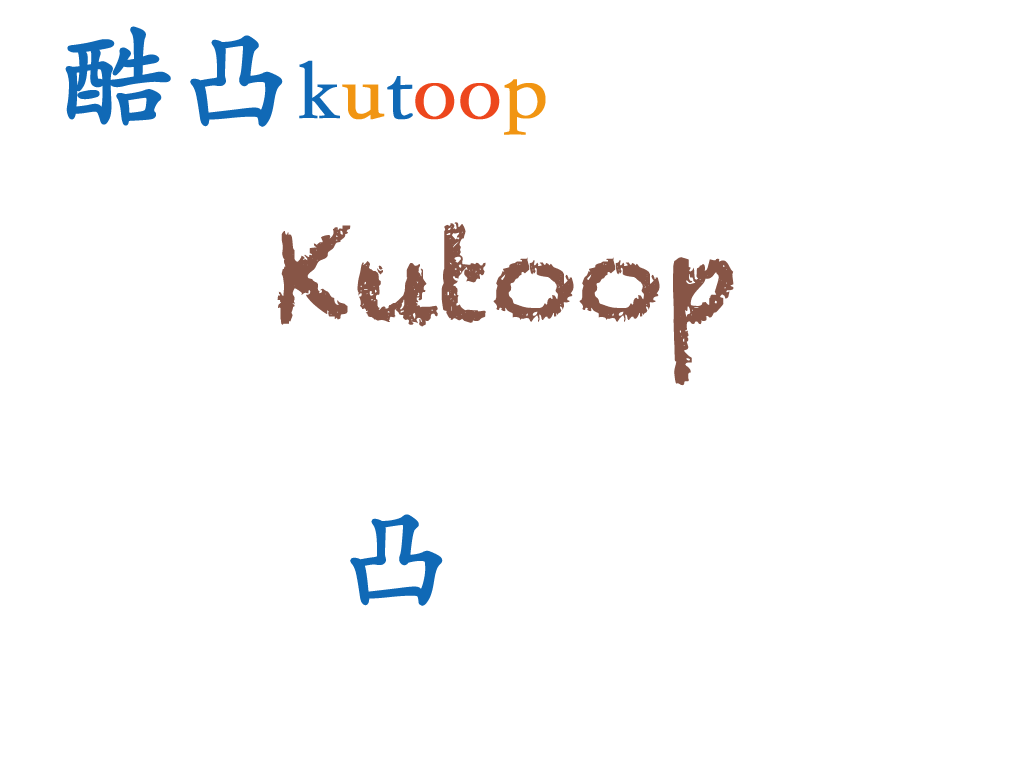
<style>
.page{position:relative;width:1024px;height:768px;background:#ffffff}
.page>*{position:absolute;margin:0}
.t1{font:120px "STKaiti";color:#1069b6;font-weight:bold}
.t2{font:85px "STKaiti";color:#1069b6;font-weight:bold}
.t3{font:85px "STKaiti";color:#f19512;font-weight:bold}
.t4{font:85px "STKaiti";color:#ed471d;font-weight:bold}
.t5{font:120px "Chalkduster";color:#875546}
</style>
<div class="page">
<p class="t1" style="left:65px;top:26px;width:481px;height:109px">酷凸<span class="t2">k</span><span class="t3">u</span><span class="t2">t</span><span class="t4">oo</span><span class="t3">p</span></p>
<p class="t5" style="left:277px;top:222px;width:457px;height:164px">Kutoop</p>
<p class="t1" style="left:350px;top:514px;width:93px;height:92px">凸</p>
</div>
